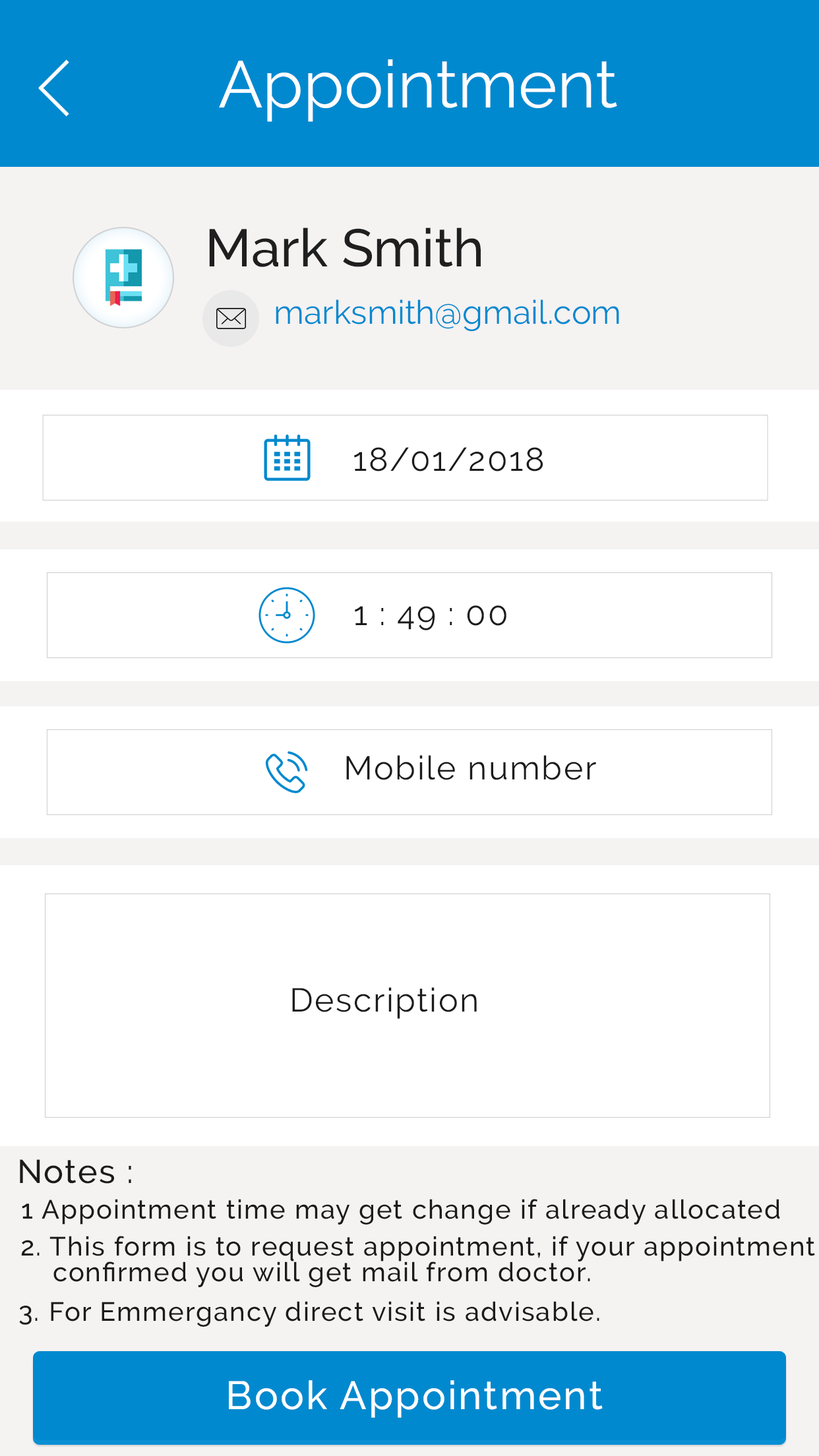
<style>
.page{position:relative;width:819px;height:1456px;background:#ffffff}
.page>*{position:absolute;margin:0}
.t1{font:65.9px "Raleway-Regular";color:#fdfeff}
.t2{font:52.8px "Raleway-Medium";color:#1f1f1f}
.t3{font:33px "Raleway-Regular";color:#0089cf}
.t4{font:33px "Raleway-Regular";letter-spacing:0.05em;color:#1b1b1b}
.t5{font:33px "Raleway-Medium";letter-spacing:0.05em;color:#1b1b1b}
.t6{font:26.4px "Raleway-Medium";letter-spacing:0.05em;color:#1b1b1b}
.t7{font:26.4px/25.7px "Raleway-Medium";letter-spacing:0.05em;color:#1b1b1b}
.t8{font:39.6px "Raleway-Medium";letter-spacing:0.05em;color:#fdfeff}
</style>
<div class="page">
<p class="t1" style="left:219px;top:59px;width:398px;height:63px">Appointment</p>
<p class="t2" style="left:209px;top:227px;width:272px;height:40px">Mark Smith</p>
<p class="t3" style="left:276px;top:299px;width:343px;height:33px">marksmith@gmail.com</p>
<p class="t4" style="left:354px;top:447px;width:189px;height:24px">18/01/2018</p>
<p class="t4" style="left:355px;top:605px;width:151px;height:25px">1 : 49 : 00</p>
<p class="t4" style="left:346px;top:755px;width:250px;height:25px">Mobile number</p>
<p class="t4" style="left:292px;top:987px;width:185px;height:32px">Description</p>
<p class="t5" style="left:20px;top:1159px;width:111px;height:25px">Notes :</p>
<p class="t6" style="left:22px;top:1199px;width:758px;height:26px">1 Appointment time may get change if already allocated</p>
<p class="t7" style="left:21px;top:1236px;width:794px;height:51px">2. This form is to request appointment, if your appointment<br>    confirmed you will get mail from doctor.</p>
<p class="t6" style="left:19px;top:1301px;width:580px;height:26px">3. For Emmergancy direct visit is advisable.</p>
<p class="t8" style="left:229px;top:1380px;width:374px;height:38px">Book Appointment</p>
</div>
